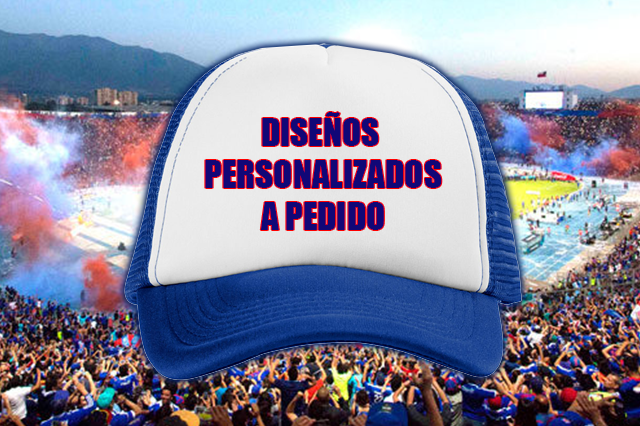
<style>
.page{position:relative;width:640px;height:426px}
.page>*{position:absolute;margin:0}
.t1{font:35px "Impact";color:#110777;text-transform:uppercase}
</style>
<div class="page">
<p class="t1" style="left:205px;top:112px;width:237px;height:118px;text-align:center">DISEÑOS <br>PERSONALIZADOS<br>A PEDIDO</p>
</div>
